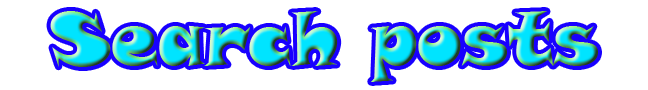
<style>
.page{position:relative;width:648px;height:90px;background:#ffffff}
.page>*{position:absolute;margin:0}
.t1{font:74.3px "SnapITC-Regular"}
</style>
<div class="page">
<p class="t1" style="left:50px;top:11px;width:548px;height:71px">Search posts</p>
</div>
